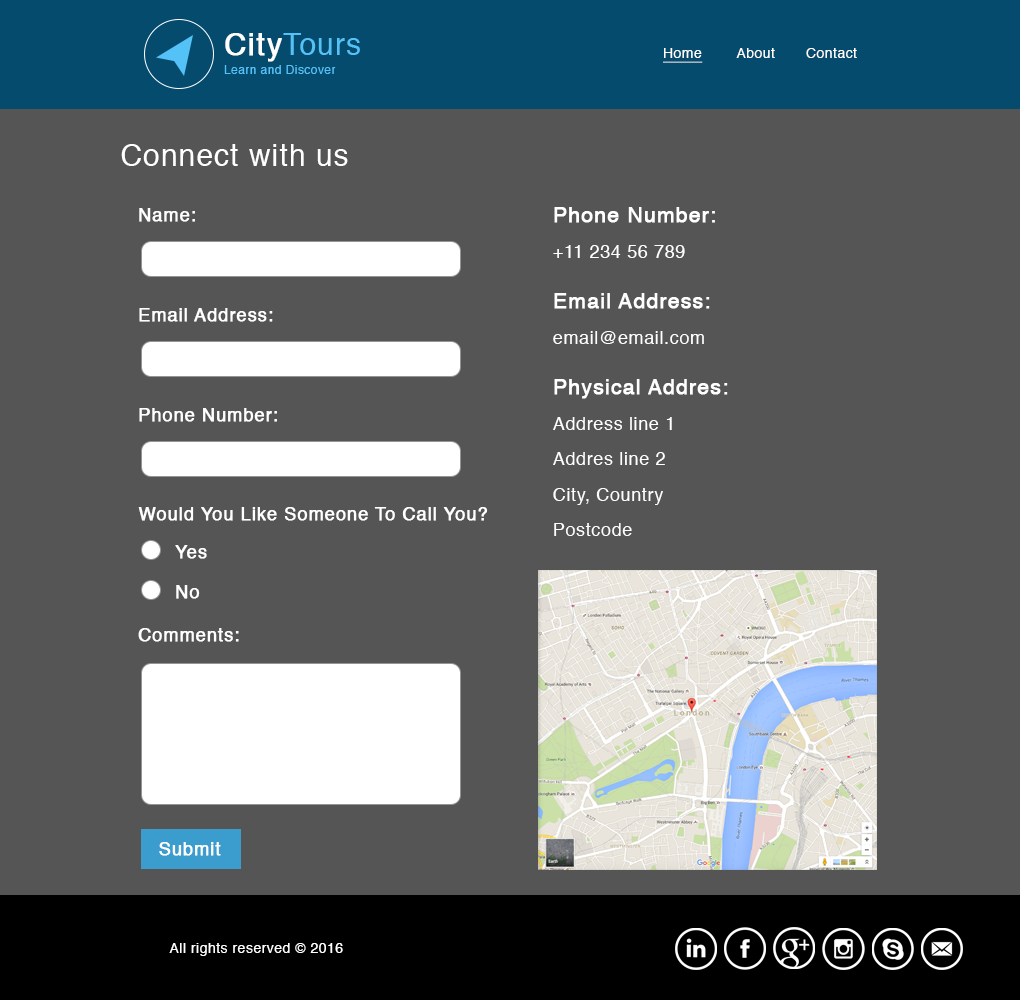
<style>
.page{position:relative;width:1020px;height:1000px;background:#555555}
.page>*{position:absolute;margin:0}
.t1{font:11.9px/19.3px "Helvetica";letter-spacing:0.035em;color:#54c1f7}
.t2{font:29.8px/23.3px "Helvetica";letter-spacing:0.035em;color:#ffffff;font-weight:bold}
.t3{font:29.8px/23.3px "Helvetica";letter-spacing:0.035em;color:#54c1f7}
.t4{font:14.2px "Helvetica";letter-spacing:0.035em;color:#ffffff}
.t5{font:14.2px "Helvetica";letter-spacing:0.035em;color:#ffffff;text-decoration:underline}
.t6{font:30px "Helvetica";letter-spacing:0.035em;color:#ffffff}
.t7{font:18px "Helvetica";letter-spacing:0.035em;color:#ffffff;font-weight:bold}
.t8{font:18px/35.5px "Helvetica";letter-spacing:0.035em;color:#ffffff}
.t9{font:21px/35.5px "Helvetica";letter-spacing:0.035em;color:#ffffff;font-weight:bold}
.t10{font:21px/50.5px "Helvetica";letter-spacing:0.035em;color:#ffffff;font-weight:bold}
.t11{font:14px "Helvetica";letter-spacing:0.035em;color:#ffffff}
</style>
<div class="page">
<p class="t1" style="left:224px;top:33px;width:136px;height:41px"><span class="t2">City</span><span class="t3">Tours<br></span>Learn and Discover</p>
<p class="t4" style="left:663px;top:48px;width:194px;height:15px"><span class="t5">Home</span>        About       Contact</p>
<p class="t6" style="left:121px;top:144px;width:227px;height:22px">Connect with us</p>
<p class="t7" style="left:139px;top:208px;width:56px;height:14px">Name:</p>
<p class="t8" style="left:553px;top:207px;width:175px;height:329px"><span class="t9">Phone Number:<br></span>+11 234 56 789<br><span class="t10">Email Address:<br></span>email@email.com<br><span class="t10">Physical Addres:<br></span>Address line 1<br>Addres line 2<br>City, Country<br>Postcode</p>
<p class="t7" style="left:139px;top:308px;width:134px;height:14px">Email Address:</p>
<p class="t7" style="left:139px;top:408px;width:138px;height:14px">Phone Number:</p>
<p class="t7" style="left:138px;top:507px;width:350px;height:14px">Would You Like Someone To Call You?</p>
<p class="t7" style="left:175px;top:545px;width:32px;height:14px">Yes</p>
<p class="t7" style="left:176px;top:585px;width:24px;height:14px">No</p>
<p class="t7" style="left:138px;top:628px;width:101px;height:14px">Comments:</p>
<p class="t7" style="left:159px;top:842px;width:62px;height:14px">Submit</p>
<p class="t11" style="left:169px;top:943px;width:174px;height:13px">All rights reserved © 2016</p>
</div>
